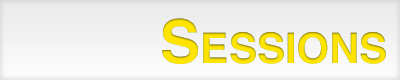
<style>
.page{position:relative;width:400px;height:80px}
.page>*{position:absolute;margin:0}
.t1{font:60px "Helvetica-Bold";color:#ffe400;font-variant:small-caps}
</style>
<div class="page">
<p class="t1" style="left:162px;top:18px;width:224px;height:46px">Sessions</p>
<p class="t1" style="left:162px;top:18px;width:224px;height:46px">Sessions</p>
</div>
